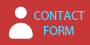
<style>
.page{position:relative;width:90px;height:45px;background:#c83737}
.page>*{position:absolute;margin:0}
.t1{font:12.4px "MyriadPro-Regular";color:#59d0fc}
</style>
<div class="page">
<p class="t1" style="left:34px;top:11px;width:51px;height:24px;text-align:center">CONTACT<br>FORM</p>
</div>
